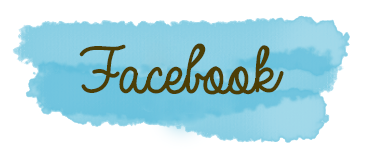
<style>
.page{position:relative;width:389px;height:166px;background:#ffffff}
.page>*{position:absolute;margin:0}
.t1{font:72px "AlwaysInMyHeart";color:#4c3e06}
</style>
<div class="page">
<p class="t1" style="left:79px;top:43px;width:205px;height:52px">Facebook</p>
</div>
